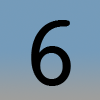
<style>
.page{position:relative;width:100px;height:100px}
.page>*{position:absolute;margin:0}
.t1{font:100px "Courier";letter-spacing:0.008em;color:#000000}
</style>
<div class="page">
<p class="t1" style="left:31px;top:20px;width:40px;height:66px">6</p>
</div>
